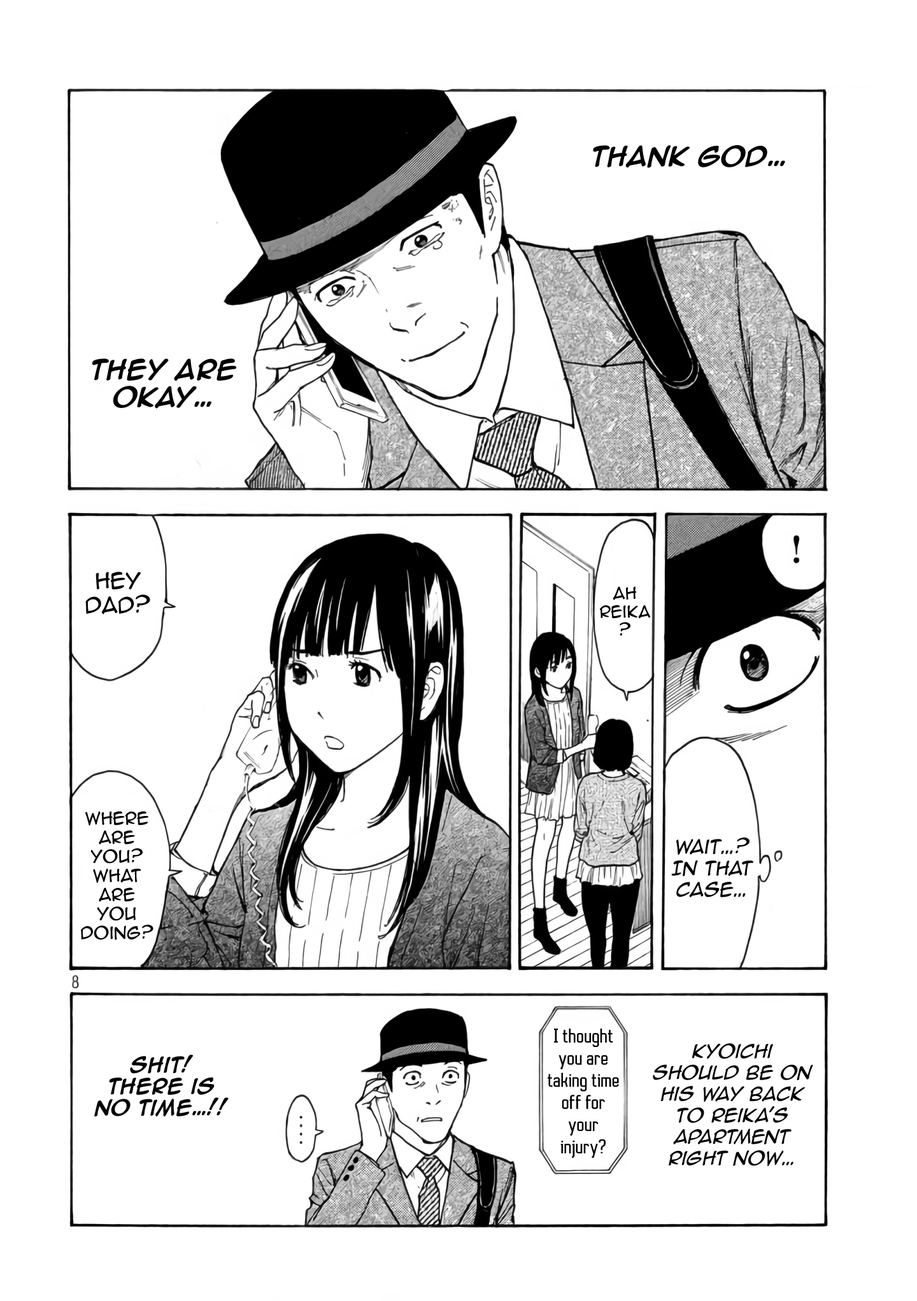
<style>
.page{position:relative;width:917px;height:1301px;background:#ffffff}
.page>*{position:absolute;margin:0}
.t1{font:22.9px "AnimeAce2.0BB-Bold";color:#020202}
.t2{font:20.4px "AnimeAce2.0BB";color:#020202}
.t3{font:15.3px "AnimeAce2.0BB";color:#020202}
.t4{font:15.9px "AnimeAce2.0BB";color:#020202}
.t5{font:17.8px "AnimeAce2.0BB";color:#020202;font-style:italic}
.t6{font:18.5px "AutobusBold";color:#020202}
.t7{font:17.8px "AnimeAce2.0BB-Italic";color:#020202}
.t8{font:17.8px "AnimeAce2.0BB-Bold";color:#020202}
</style>
<div class="page">
<p class="t1" style="left:593px;top:145px;width:192px;height:23px">Thank God…</p>
<p class="t1" style="left:92px;top:358px;width:145px;height:51px;text-align:center">They are okay…</p>
<p class="t2" style="left:85px;top:572px;width:65px;height:42px;text-align:center">Hey Dad?</p>
<p class="t3" style="left:600px;top:586px;width:50px;height:50px;text-align:center">Ah Reika?</p>
<p class="t4" style="left:81px;top:811px;width:72px;height:129px;text-align:center">Where are you? What are you doing?</p>
<p class="t5" style="left:671px;top:837px;width:82px;height:60px;text-align:center">Wait…? In that case…</p>
<p class="t6" style="left:547px;top:1029px;width:72px;height:129px;text-align:center">I thought you are taking time off for your injury?</p>
<p class="t7" style="left:652px;top:1043px;width:161px;height:123px;text-align:center">Kyoichi should be on his way back to Reika's apartment right now…</p>
<p class="t8" style="left:94px;top:1055px;width:135px;height:61px;text-align:center">Shit! <br>there is no time…!!</p>
</div>
